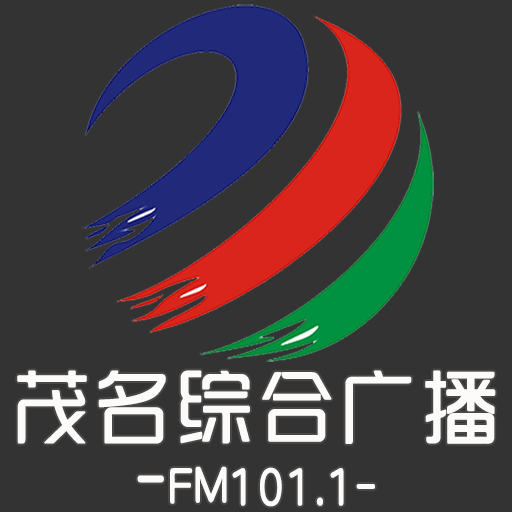
<style>
.page{position:relative;width:512px;height:512px;background:#333333}
.page>*{position:absolute;margin:0}
.t1{font:50px/75px "SJyuantijian-C-Regular";letter-spacing:0.02em;color:#fcfbf9;scale:0.85 1}
.t2{font:80px/75px "SJyunlvyuan";letter-spacing:0.02em;color:#fcfbf9}
.t3{font:72px/75px "SJyuantijian-C-Regular";letter-spacing:0.02em;color:#fcfbf9;scale:0.85 1}
</style>
<div class="page">
<p class="t1" style="left:17px;top:370px;width:479px;height:137px;text-align:center"><span class="t2">茂名综合广播</span><span class="t3">-</span>FM101.1-</p>
</div>
